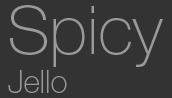
<style>
.page{position:relative;width:172px;height:98px;background:#333333}
.page>*{position:absolute;margin:0}
.t1{font:67.5px "HelveticaNeue-Thin";color:#9a9a9a}
.t2{font:31.7px "HelveticaNeue-Thin";color:#9a9a9a}
</style>
<div class="page">
<p class="t1" style="left:10px;top:5px;width:153px;height:62px">Spicy</p>
<p class="t2" style="left:8px;top:70px;width:59px;height:23px">Jello</p>
</div>
